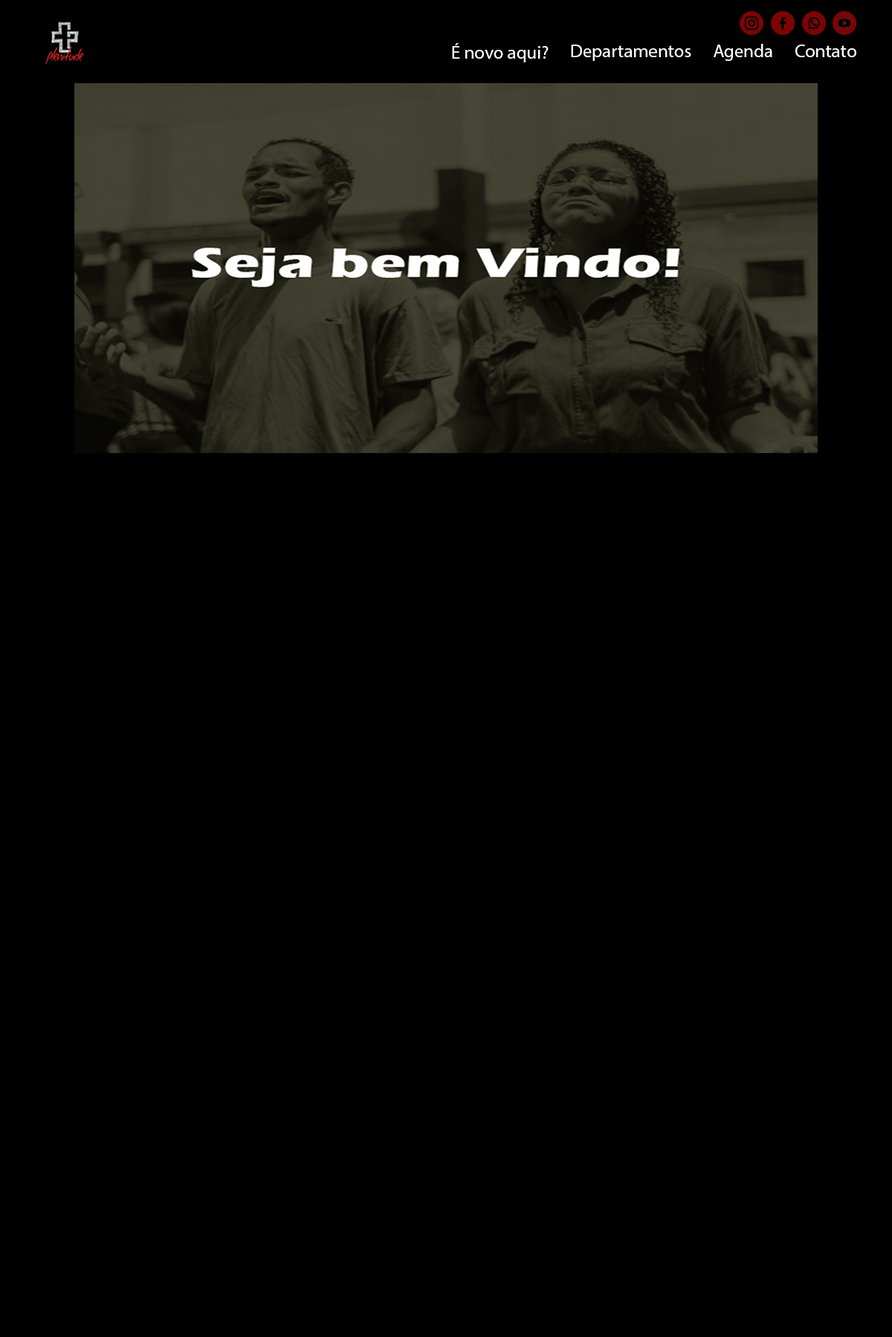
<style>
.page{position:relative;width:892px;height:1337px;background:#000000}
.page>*{position:absolute;margin:0}
.t1{font:18.6px "MyriadPro-Regular";color:#ffffff}
</style>
<div class="page">
<p class="t1" style="left:452px;top:43px;width:96px;height:19px">É novo aqui?</p>
<p class="t1" style="left:571px;top:45px;width:120px;height:16px">Departamentos</p>
<p class="t1" style="left:713px;top:44px;width:59px;height:17px">Agenda</p>
<p class="t1" style="left:795px;top:45px;width:61px;height:12px">Contato</p>
</div>
